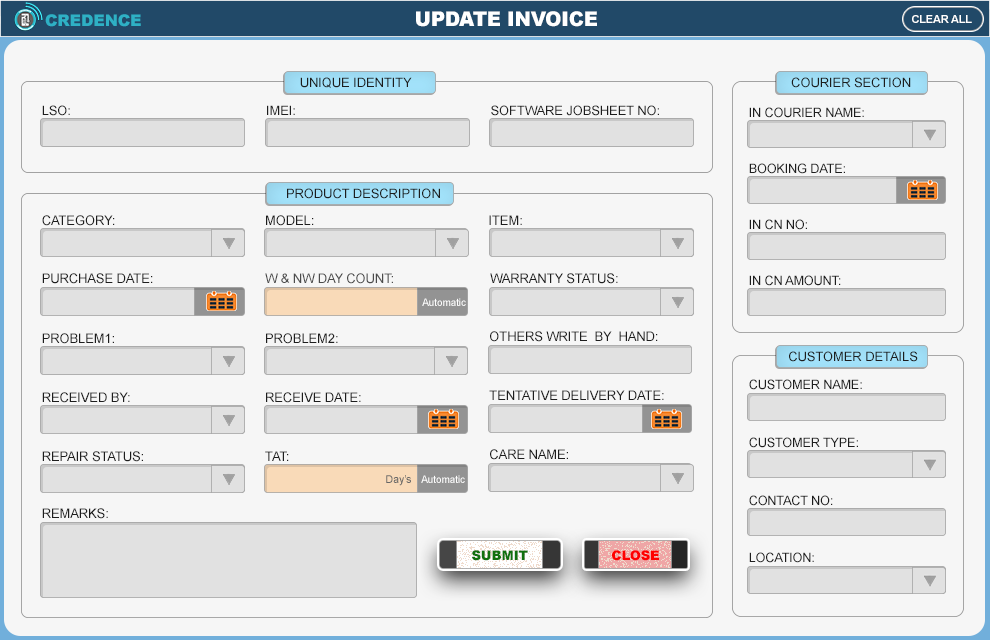
<style>
.page{position:relative;width:990px;height:640px;background:#f6f6f6}
.page>*{position:absolute;margin:0}
.t1{font:16px "Arial-Black";letter-spacing:-0.01em;color:#2eb1c5}
.t2{font:20.2px "Arial-Black";letter-spacing:-0.01em;color:#ffffff}
.t3{font:10.9px "Arial-BoldMT";letter-spacing:-0.01em;color:#ffffff}
.t4{font:13.1px "ArialMT";letter-spacing:-0.01em;color:#1d1d1d}
.t5{font:12.9px "ArialMT";letter-spacing:-0.01em;color:#1d1d1d}
.t6{font:12.7px "ArialMT";letter-spacing:-0.01em;color:#1d1d1d}
.t7{font:13.2px "ArialMT";letter-spacing:-0.01em;color:#1d1d1d}
.t8{font:13.2px "ArialMT";letter-spacing:-0.01em;color:#4b4b4b}
.t9{font:10.2px "ArialMT";letter-spacing:-0.01em;color:#ffffff}
.t10{font:10.8px "ArialMT";letter-spacing:-0.01em;color:#666666}
.t11{font:13.2px "Arial-Black";letter-spacing:-0.01em;color:#11710f}
.t12{font:13.2px "Arial-Black";letter-spacing:-0.01em;color:#ff0000}
</style>
<div class="page">
<p class="t1" style="left:45px;top:14px;width:96px;height:13px">CREDENCE</p>
<p class="t2" style="left:416px;top:11px;width:181px;height:16px">UPDATE INVOICE</p>
<p class="t3" style="left:912px;top:15px;width:60px;height:8px">CLEAR ALL</p>
<p class="t4" style="left:300px;top:77px;width:112px;height:11px">UNIQUE IDENTITY</p>
<p class="t4" style="left:791px;top:77px;width:120px;height:11px">COURIER SECTION</p>
<p class="t5" style="left:42px;top:105px;width:28px;height:11px">LSO:</p>
<p class="t5" style="left:267px;top:105px;width:28px;height:10px">IMEI:</p>
<p class="t5" style="left:491px;top:105px;width:168px;height:11px">SOFTWARE JOBSHEET NO:</p>
<p class="t6" style="left:749px;top:107px;width:115px;height:11px">IN COURIER NAME:</p>
<p class="t6" style="left:749px;top:163px;width:96px;height:11px">BOOKING DATE:</p>
<p class="t4" style="left:287px;top:188px;width:153px;height:11px">PRODUCT DESCRIPTION</p>
<p class="t7" style="left:42px;top:215px;width:73px;height:11px">CATEGORY:</p>
<p class="t7" style="left:266px;top:215px;width:48px;height:11px">MODEL:</p>
<p class="t7" style="left:489px;top:215px;width:33px;height:10px">ITEM:</p>
<p class="t6" style="left:749px;top:219px;width:58px;height:11px">IN CN NO:</p>
<p class="t7" style="left:42px;top:273px;width:111px;height:11px">PURCHASE DATE:</p>
<p class="t8" style="left:265px;top:273px;width:128px;height:11px">W &amp; NW DAY COUNT:</p>
<p class="t7" style="left:490px;top:273px;width:128px;height:11px">WARRANTY STATUS:</p>
<p class="t6" style="left:749px;top:275px;width:92px;height:11px">IN CN AMOUNT:</p>
<p class="t9" style="left:422px;top:298px;width:44px;height:8px">Automatic</p>
<p class="t7" style="left:42px;top:333px;width:72px;height:11px">PROBLEM1:</p>
<p class="t7" style="left:266px;top:333px;width:72px;height:11px">PROBLEM2:</p>
<p class="t7" style="left:490px;top:331px;width:168px;height:11px">OTHERS WRITE  BY  HAND:</p>
<p class="t4" style="left:789px;top:351px;width:129px;height:11px">CUSTOMER DETAILS</p>
<p class="t7" style="left:489px;top:390px;width:175px;height:10px">TENTATIVE DELIVERY DATE:</p>
<p class="t6" style="left:749px;top:379px;width:113px;height:11px">CUSTOMER NAME:</p>
<p class="t7" style="left:42px;top:392px;width:88px;height:11px">RECEIVED BY:</p>
<p class="t7" style="left:266px;top:392px;width:95px;height:11px">RECEIVE DATE:</p>
<p class="t6" style="left:749px;top:437px;width:109px;height:11px">CUSTOMER TYPE:</p>
<p class="t7" style="left:490px;top:449px;width:78px;height:11px">CARE NAME:</p>
<p class="t7" style="left:42px;top:451px;width:101px;height:11px">REPAIR STATUS:</p>
<p class="t7" style="left:265px;top:451px;width:24px;height:10px">TAT:</p>
<p class="t10" style="left:386px;top:475px;width:25px;height:11px">Day’s</p>
<p class="t9" style="left:421px;top:475px;width:44px;height:8px">Automatic</p>
<p class="t6" style="left:749px;top:495px;width:84px;height:11px">CONTACT NO:</p>
<p class="t7" style="left:42px;top:508px;width:66px;height:11px">REMARKS:</p>
<p class="t11" style="left:472px;top:550px;width:56px;height:11px">SUBMIT</p>
<p class="t12" style="left:612px;top:550px;width:47px;height:11px">CLOSE</p>
<p class="t6" style="left:749px;top:552px;width:65px;height:11px">LOCATION:</p>
</div>
